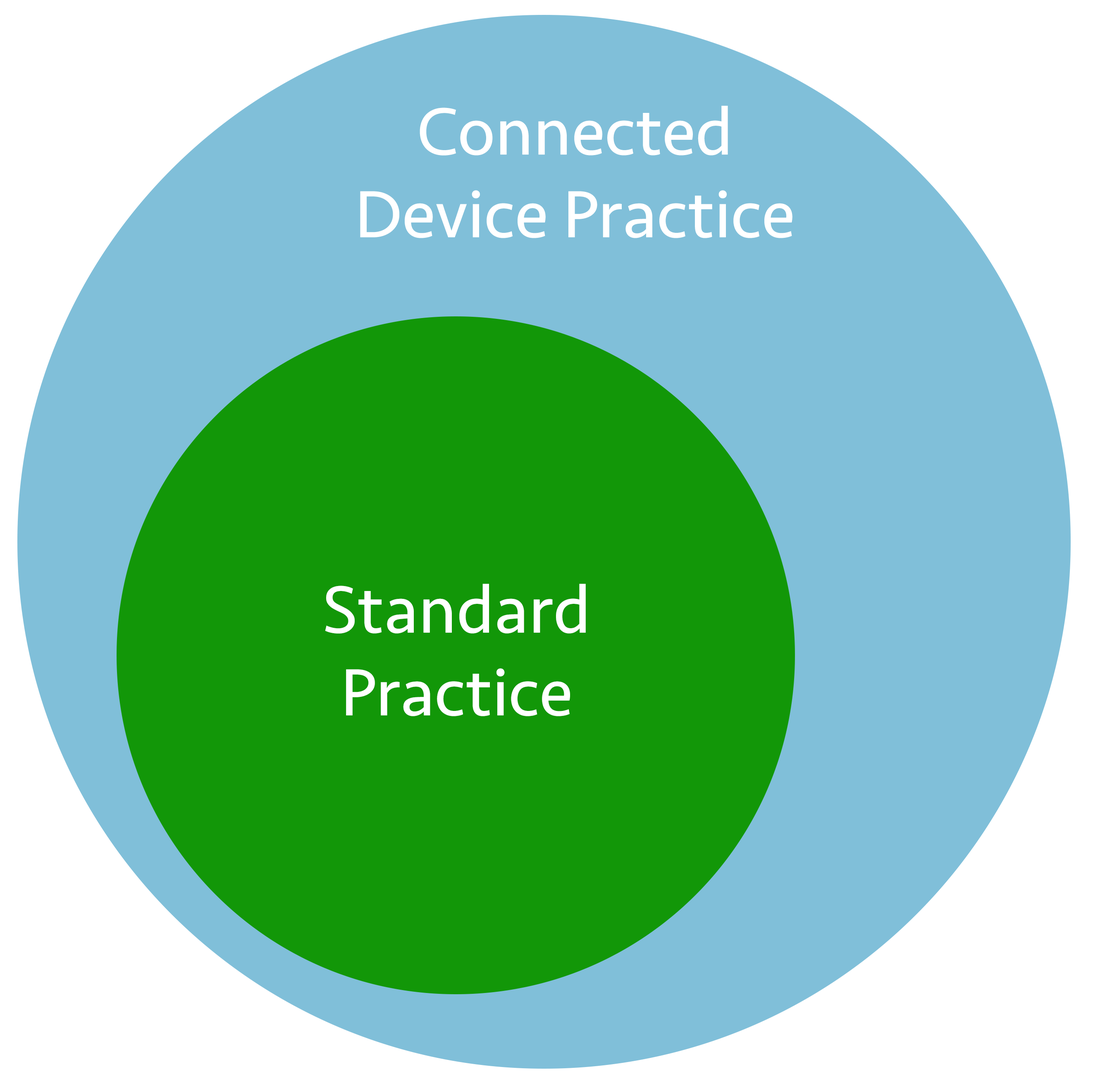
<style>
.page{position:relative;width:1093px;height:1091px;background:#80bfd9}
.page>*{position:absolute;margin:0}
.t1{font:68.9px "Seravek";color:#ffffff}
</style>
<div class="page">
<p class="t1" style="left:360px;top:105px;width:433px;height:133px;text-align:center">Connected<br>Device Practice</p>
<p class="t1" style="left:325px;top:583px;width:261px;height:133px;text-align:center">Standard<br>Practice</p>
</div>
